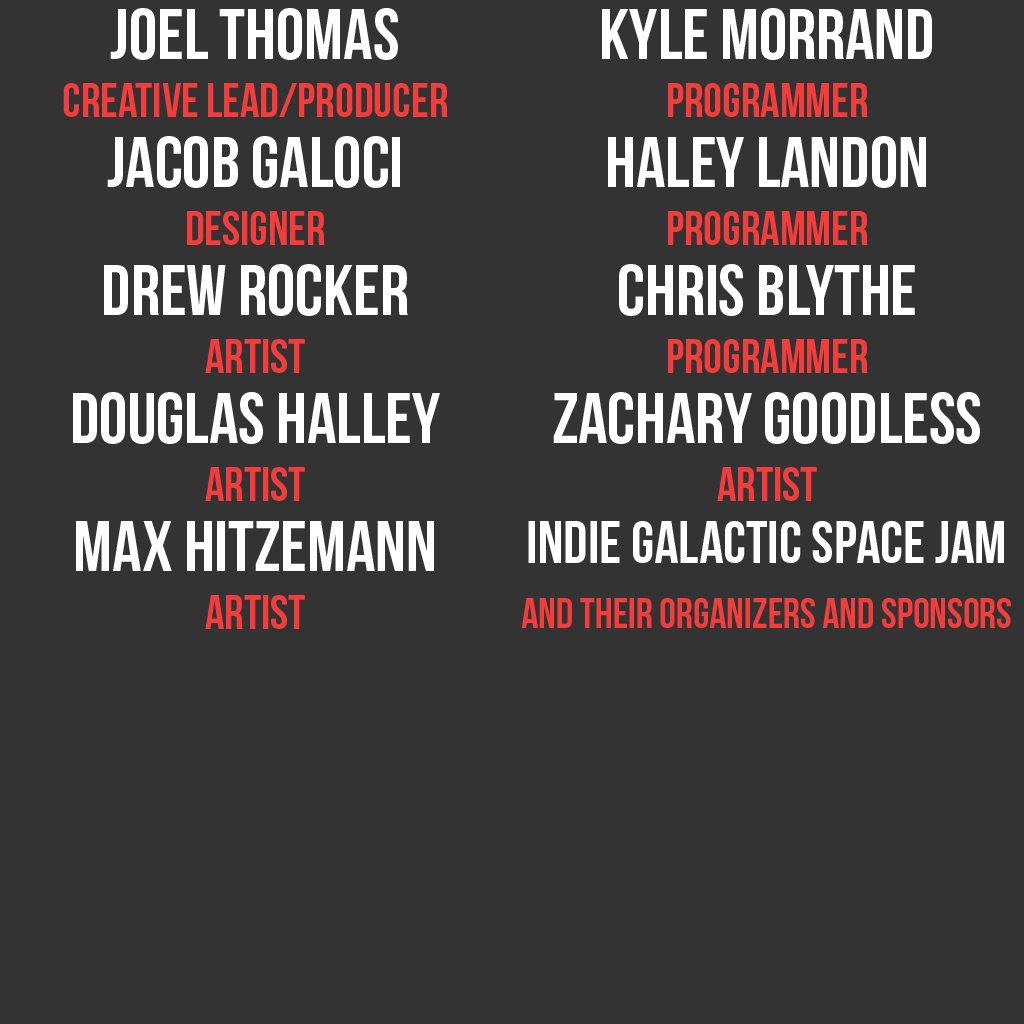
<style>
.page{position:relative;width:1024px;height:1024px;background:#333333}
.page>*{position:absolute;margin:0}
.t1{font:48px "BebasNeue";color:#f33d3d}
.t2{font:72px "BebasNeue";color:#ffffff}
.t3{font:42px/65px "BebasNeue";color:#f33d3d}
.t4{font:60px "BebasNeue";color:#ffffff}
</style>
<div class="page">
<p class="t1" style="left:63px;top:8px;width:385px;height:109px;text-align:center"><span class="t2">Joel Thomas<br></span>Creative Lead/Producer</p>
<p class="t2" style="left:602px;top:8px;width:330px;height:109px;text-align:center">Kyle Morrand<br><span class="t1">Programmer</span></p>
<p class="t2" style="left:107px;top:136px;width:293px;height:109px;text-align:center">Jacob Galoci<br><span class="t1">Designer</span></p>
<p class="t2" style="left:608px;top:136px;width:318px;height:109px;text-align:center">Haley Landon<br><span class="t1">Programmer</span></p>
<p class="t2" style="left:104px;top:264px;width:304px;height:109px;text-align:center">Drew Rocker<br><span class="t1">Artist</span></p>
<p class="t2" style="left:619px;top:264px;width:296px;height:109px;text-align:center">Chris Blythe<br><span class="t1">Programmer</span></p>
<p class="t2" style="left:73px;top:392px;width:367px;height:109px;text-align:center">Douglas Halley<br><span class="t1">Artist</span></p>
<p class="t2" style="left:553px;top:392px;width:427px;height:109px;text-align:center">Zachary Goodless<br><span class="t1">Artist</span></p>
<p class="t2" style="left:76px;top:521px;width:358px;height:108px;text-align:center">MAX hitzemann<br><span class="t1">Artist</span></p>
<p class="t3" style="left:521px;top:521px;width:490px;height:107px;text-align:center"><span class="t4">Indie Galactic Space Jam<br></span>and their organizers and sponsors</p>
</div>
